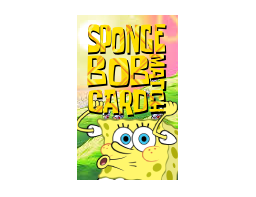
<style>
.page{position:relative;width:256px;height:197px;background:#ffffff}
.page>*{position:absolute;margin:0}
.t1{font:28.4px "SpongeboyTT1";scale:0.65 1}
.t2{font:27.8px "SpongeboyTT1";color:#fde103;scale:0.65 1}
.t3{font:15px "SpongeboyTT1";color:#fde103;scale:1.04 1}
.t4{font:30.2px "SpongeboyTT1";scale:0.97 1}
.t5{font:30.8px "SpongeboyTT1";scale:0.97 1}
.t6{font:15.3px "SpongeboyTT1";scale:1.04 1}
.t7{font:24.1px "SpongeboyTT1";color:#fee102;scale:0.86 1}
.t8{font:24.6px "SpongeboyTT1";scale:0.86 1}
</style>
<div class="page">
<p class="t1" style="left:88px;top:25px;width:79px;height:30px">SPONGE</p>
<p class="t2" style="left:88px;top:24px;width:78px;height:29px">SPONGE</p>
<p class="t3" style="left:149px;top:54px;width:16px;height:58px;rotate:90deg">MATCH</p>
<p class="t4" style="left:87px;top:55px;width:63px;height:31px">BOB</p>
<p class="t5" style="left:88px;top:56px;width:63px;height:32px">BOB</p>
<p class="t6" style="left:150px;top:55px;width:17px;height:60px;rotate:90deg">MATCH</p>
<p class="t7" style="left:88px;top:89px;width:59px;height:26px">CARD</p>
<p class="t8" style="left:88px;top:90px;width:61px;height:27px">CARD</p>
</div>
